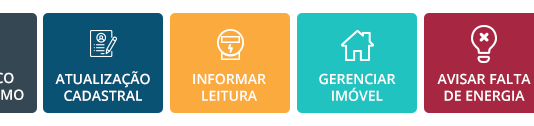
<style>
.page{position:relative;width:534px;height:126px;background:#ffffff}
.page>*{position:absolute;margin:0}
.t1{font:14px "OpenSans-SemiBold";color:#ffffff;text-transform:uppercase}
</style>
<div class="page">
<p class="t1" style="left:55px;top:71px;width:95px;height:30px;text-align:center">atualização<br>cadastral</p>
<p class="t1" style="left:193px;top:73px;width:73px;height:28px;text-align:center">informar<br>leitura</p>
<p class="t1" style="left:319px;top:73px;width:77px;height:28px;text-align:center">Gerenciar<br>imóvel</p>
<p class="t1" style="left:437px;top:73px;width:94px;height:28px;text-align:center">Avisar falta<br>de energia</p>
</div>
